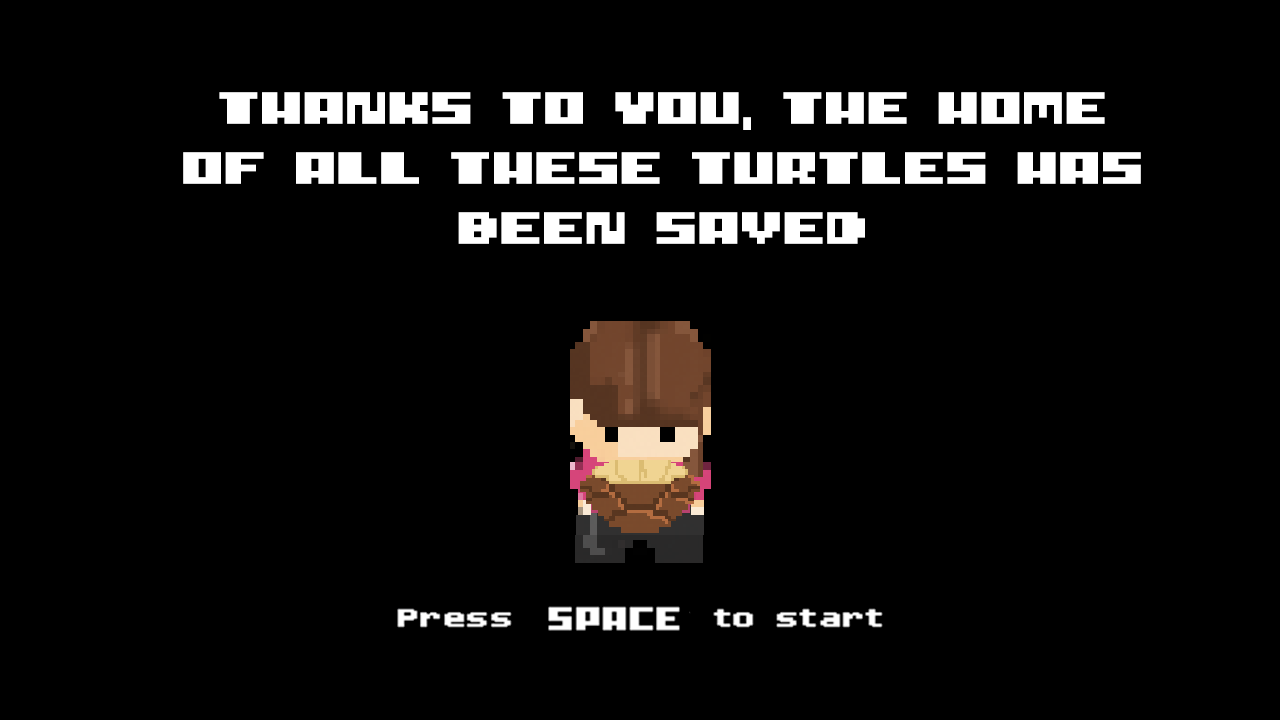
<style>
.page{position:relative;width:1280px;height:720px;background:#000000}
.page>*{position:absolute;margin:0}
.t1{font:50px "I-pixel-u";letter-spacing:-0.04em;color:#ffffff;scale:1.2 1}
</style>
<div class="page">
<p class="t1" style="left:183px;top:92px;width:958px;height:152px;text-align:center">THANKS TO YOU, THE HOME OF ALL THESE TURTLES HAS BEEN SAVED</p>
</div>
